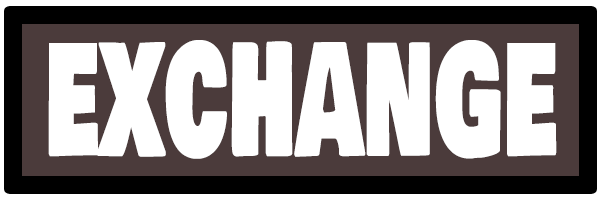
<style>
.page{position:relative;width:600px;height:200px;background:#ffffff}
.page>*{position:absolute;margin:0}
.t1{font:151.7px "BowlbyOneSC-Regular";color:#ffffff;scale:0.55 1}
</style>
<div class="page">
<p class="t1" style="left:48px;top:40px;width:509px;height:119px">EXCHANGE</p>
</div>
